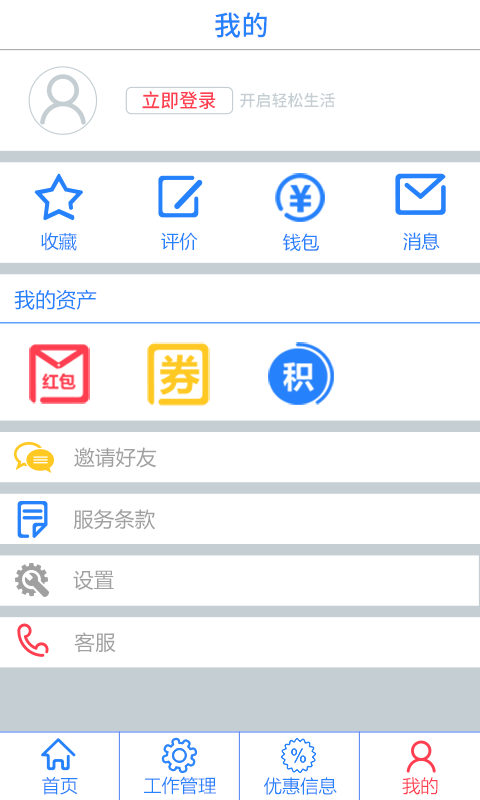
<style>
.page{position:relative;width:480px;height:800px;background:#ffffff}
.page>*{position:absolute;margin:0}
.t1{font:27.4px "NotoSansHans-Medium";color:#2681fc}
.t2{font:19.2px "NotoSansHans-Medium";color:#ff3e50}
.t3{font:16px "NotoSansHans-Medium";color:#c4ced3}
.t4{font:18.3px "MicrosoftYaHei";color:#2681fc}
.t5{font:20.6px "MicrosoftYaHei";color:#2681fc}
.t6{font:20.6px "MicrosoftYaHei";color:#a0a0a0}
.t7{font:18.3px "MicrosoftYaHeiLight";color:#2681fc}
.t8{font:18.3px "MicrosoftYaHeiLight";color:#ff3e50}
</style>
<div class="page">
<p class="t1" style="left:215px;top:12px;width:52px;height:26px">我的</p>
<p class="t2" style="left:142px;top:91px;width:74px;height:18px">立即登录</p>
<p class="t3" style="left:240px;top:92px;width:95px;height:16px">开启轻松生活</p>
<p class="t4" style="left:41px;top:232px;width:36px;height:19px">收藏</p>
<p class="t4" style="left:161px;top:232px;width:37px;height:19px">评价</p>
<p class="t4" style="left:283px;top:233px;width:36px;height:18px">钱包</p>
<p class="t4" style="left:403px;top:232px;width:37px;height:19px">消息</p>
<p class="t5" style="left:14px;top:289px;width:83px;height:21px">我的资产</p>
<p class="t6" style="left:74px;top:447px;width:83px;height:21px">邀请好友</p>
<p class="t6" style="left:73px;top:509px;width:82px;height:21px">服务条款</p>
<p class="t6" style="left:73px;top:570px;width:41px;height:20px">设置</p>
<p class="t6" style="left:74px;top:632px;width:42px;height:20px">客服</p>
<p class="t7" style="left:42px;top:777px;width:36px;height:18px">首页</p>
<p class="t7" style="left:144px;top:776px;width:72px;height:19px">工作管理</p>
<p class="t7" style="left:264px;top:777px;width:73px;height:18px">优惠信息</p>
<p class="t8" style="left:402px;top:777px;width:36px;height:18px">我的</p>
</div>
